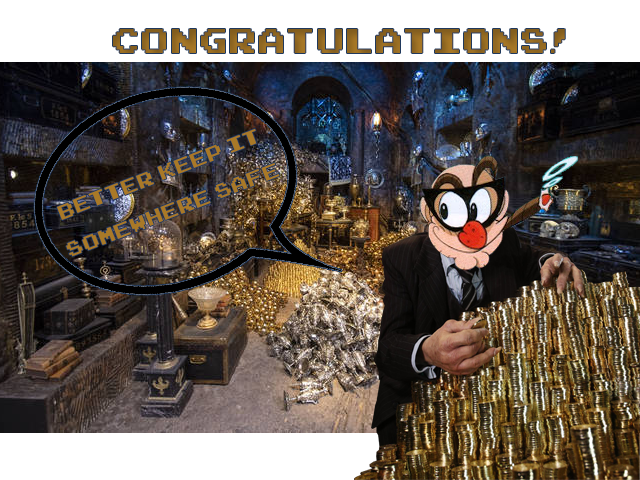
<style>
.page{position:relative;width:640px;height:480px}
.page>*{position:absolute;margin:0}
.t1{font:55px "Arcadepix-Plus";color:#906721}
.t2{font:32px "Arcadepix-Plus";color:#a97927}
</style>
<div class="page">
<p class="t1" style="left:113px;top:29px;width:452px;height:24px">CONGRATULATIONS!</p>
<p class="t2" style="left:57px;top:129px;width:223px;height:128px;rotate:-21deg">BETTER KEEP IT SOMEWHERE SAFE</p>
</div>
